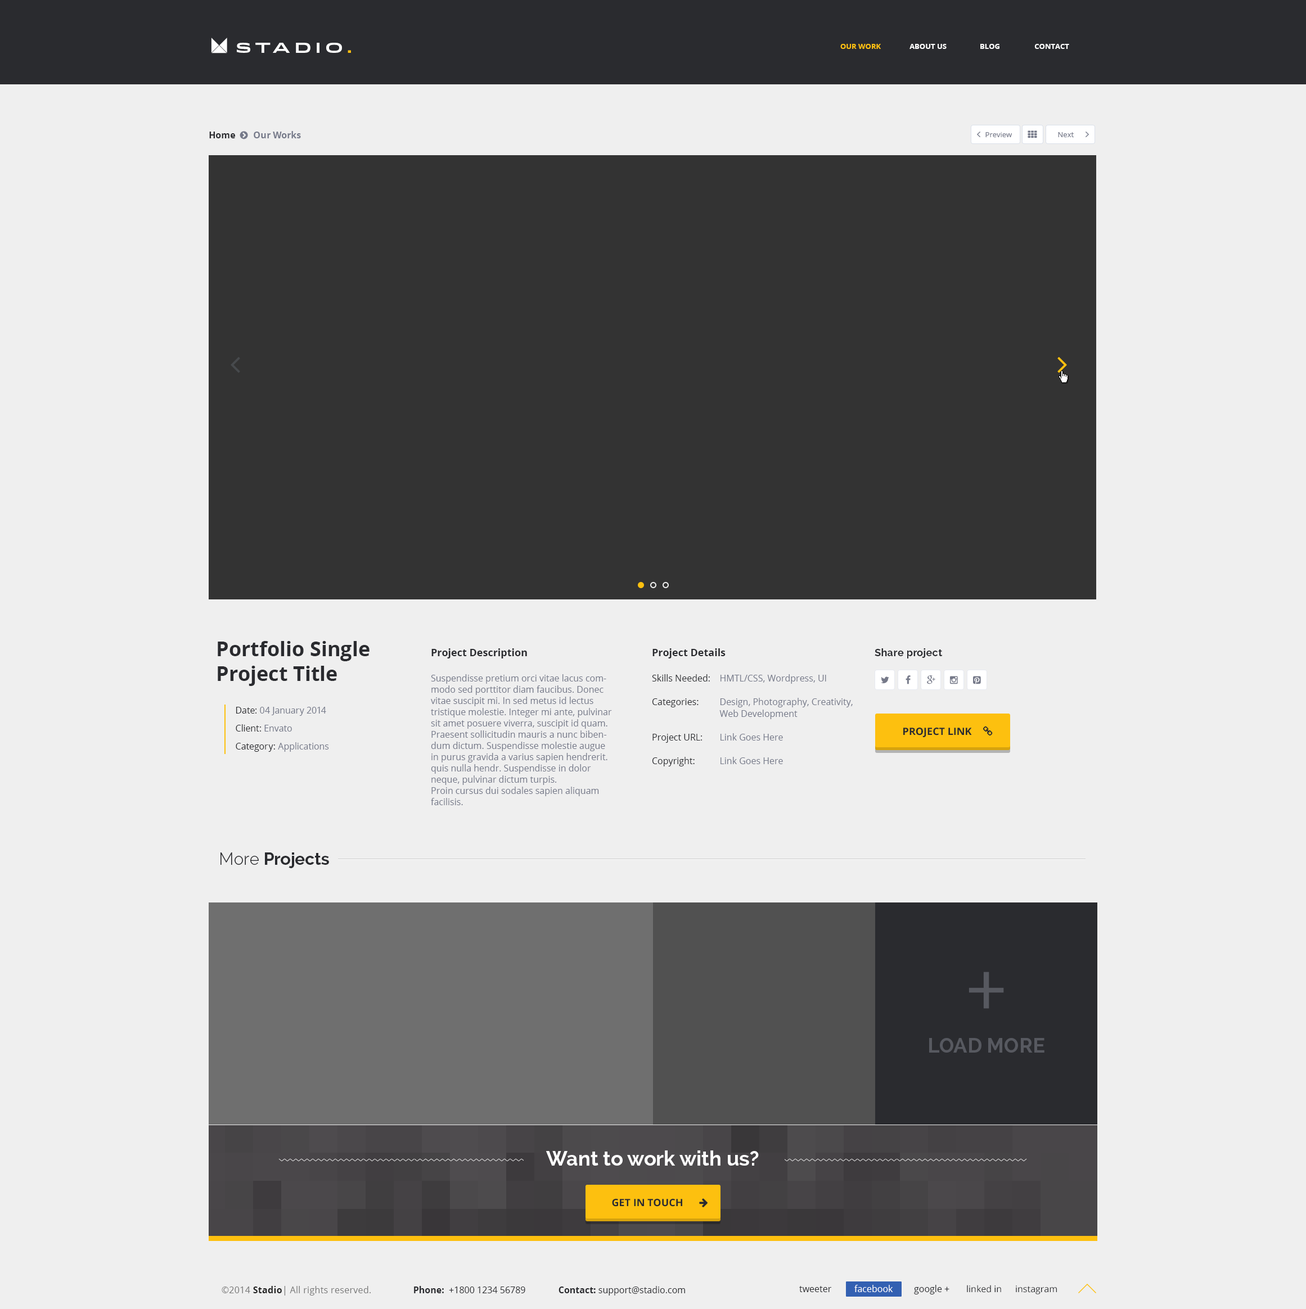
<style>
.page{position:relative;width:1306px;height:1309px;background:#efefef}
.page>*{position:absolute;margin:0}
.t1{font:13.5px "Idlewild-Bold";letter-spacing:0.3em;color:#ffffff;text-transform:uppercase}
.t2{font:13.5px "Idlewild-Bold";letter-spacing:0.3em;color:#fdc00f;text-transform:uppercase}
.t3{font:7.3px "OpenSans-Bold";color:#fdc00f;text-transform:uppercase}
.t4{font:7.3px "OpenSans-Bold";color:#ffffff;text-transform:uppercase}
.t5{font:9px "OpenSans-Bold";color:#757989}
.t6{font:9px "OpenSans-Bold";color:#2a2b2f}
.t7{font:7.3px "OpenSans";color:#757989}
.t8{font:20.2px/24.7px "OpenSans-Bold";color:#2a2b2f}
.t9{font:10.1px "OpenSans-Bold";color:#2a2b2f}
.t10{font:10.1px "Raleway-Bold";letter-spacing:0.02em;color:#2a2b2f}
.t11{font:9px/11.2px "OpenSans";color:#757989}
.t12{font:9px/11.8px "OpenSans";color:#757989}
.t13{font:9px/11.2px "OpenSans";color:#2a2b2f}
.t14{font:9px/11.8px "OpenSans";color:#2a2b2f}
.t15{font:9px "OpenSans";color:#757989}
.t16{font:9px "OpenSans";color:#2a2b2f}
.t17{font:10.1px "OpenSans-Bold";color:#2a2b2f;text-transform:uppercase}
.t18{font:16.9px "Raleway-Bold";color:#2a2b2f}
.t19{font:16.9px "Raleway-Light";color:#2a2b2f}
.t20{font:20.2px "Raleway-Bold";color:#575960}
.t21{font:20.2px "Raleway-Bold";color:#ffffff}
.t22{font:9px "OpenSans";letter-spacing:0.02em;color:#787878}
.t23{font:9px "OpenSans-Bold";letter-spacing:0.02em;color:#222222}
.t24{font:9px "OpenSans";color:#ffffff}
</style>
<div class="page">
<p class="t1" style="left:237px;top:43px;width:114px;height:10px">stAdio<span class="t2">.</span></p>
<p class="t3" style="left:840px;top:44px;width:41px;height:5px">our work</p>
<p class="t4" style="left:910px;top:44px;width:37px;height:5px">About us</p>
<p class="t4" style="left:980px;top:44px;width:20px;height:5px">BLOG</p>
<p class="t4" style="left:1034px;top:44px;width:35px;height:5px">Contact</p>
<p class="t5" style="left:209px;top:131px;width:92px;height:7px"><span class="t6">Home        </span>Our Works</p>
<p class="t7" style="left:985px;top:132px;width:27px;height:5px">Preview</p>
<p class="t7" style="left:1058px;top:132px;width:16px;height:5px">Next</p>
<p class="t8" style="left:218px;top:641px;width:152px;height:45px">Portfolio Single Project Title</p>
<p class="t9" style="left:431px;top:649px;width:96px;height:10px">Project Description</p>
<p class="t9" style="left:652px;top:649px;width:74px;height:10px">Project Details</p>
<p class="t10" style="left:875px;top:649px;width:68px;height:10px">Share project</p>
<p class="t11" style="left:431px;top:674px;width:181px;height:131px">Suspendisse pretium orci vitae lacus commodo sed porttitor diam faucibus. Donec vitae suscipit mi. In sed metus id lectus tristique molestie. Integer mi ante, pulvinar sit amet posuere viverra, suscipit id quam. Praesent sollicitudin mauris a nunc bibendum dictum. Suspendisse molestie augue in purus gravida a varius sapien hendrerit. quis nulla hendr. Suspendisse in dolor neque, pulvinar dictum turpis.<br>Proin cursus dui sodales sapien aliquam facilisis.</p>
<p class="t12" style="left:652px;top:674px;width:201px;height:93px"><span class="t13">Skills Needed:    </span>HMTL/CSS, Wordpress, UI<br><br><span class="t14">Categories:</span>    Design, Photography, Creativity,<br>      Web Development<br><br><span class="t14">Project URL:</span>    Link Goes Here<br><br><span class="t14">Copyright:</span>    Link Goes Here</p>
<p class="t15" style="left:236px;top:707px;width:90px;height:9px"><span class="t16">Date: </span>04 January 2014</p>
<p class="t16" style="left:236px;top:724px;width:56px;height:8px">Client: <span class="t15">Envato</span></p>
<p class="t17" style="left:903px;top:728px;width:69px;height:9px">Project link</p>
<p class="t15" style="left:236px;top:742px;width:93px;height:10px"><span class="t16">Category:</span> Applications</p>
<p class="t18" style="left:220px;top:853px;width:109px;height:15px"><span class="t19">More </span>Projects</p>
<p class="t20" style="left:929px;top:1038px;width:116px;height:15px">LOAD MORE</p>
<p class="t21" style="left:546px;top:1151px;width:213px;height:15px">Want to work with us?</p>
<p class="t17" style="left:612px;top:1199px;width:70px;height:8px">GET IN TOUCH</p>
<p class="t22" style="left:222px;top:1286px;width:149px;height:10px">©2014 <span class="t23">Stadio</span>| All rights reserved.</p>
<p class="t16" style="left:414px;top:1286px;width:271px;height:10px"><span class="t6">Phone:</span>  +1800 1234 56789              <span class="t6">Contact:</span> support@stadio.com</p>
<p class="t16" style="left:799px;top:1286px;width:32px;height:7px">tweeter</p>
<p class="t24" style="left:854px;top:1285px;width:39px;height:8px">facebook</p>
<p class="t16" style="left:914px;top:1285px;width:35px;height:10px">google +</p>
<p class="t16" style="left:967px;top:1285px;width:34px;height:8px">linked in</p>
<p class="t16" style="left:1016px;top:1286px;width:41px;height:9px">instagram</p>
</div>
